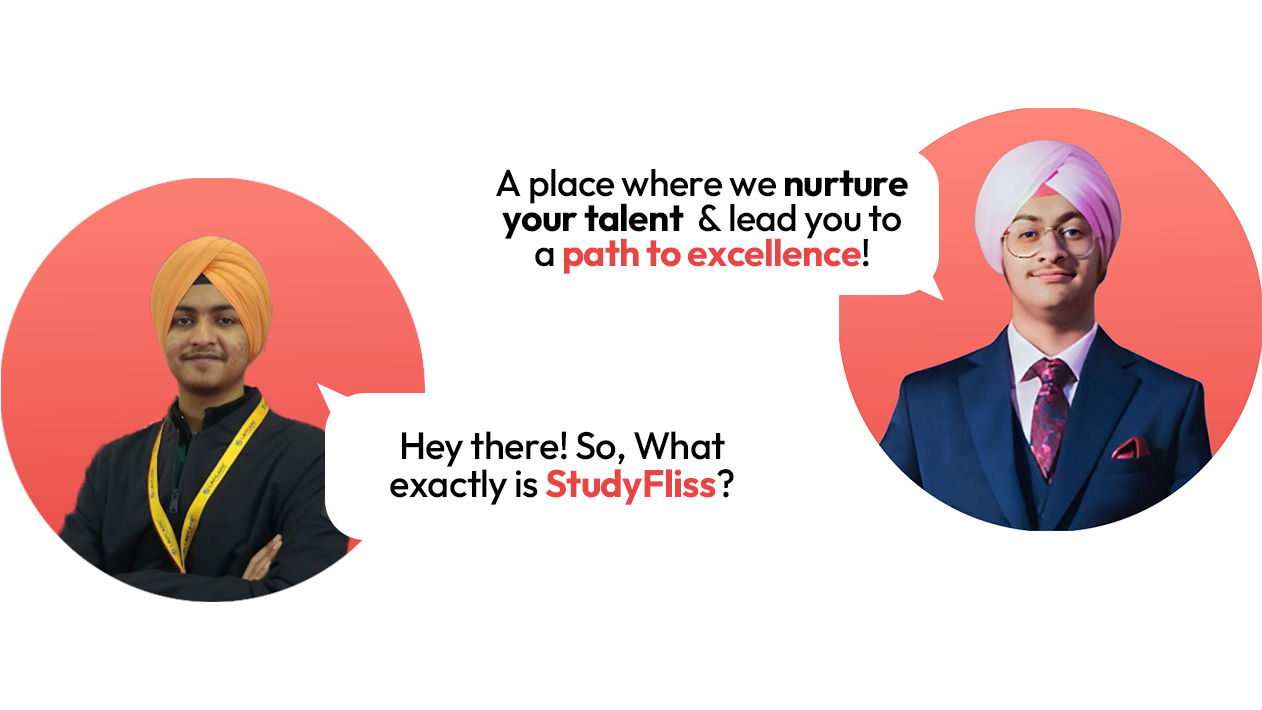
<style>
.page{position:relative;width:1262px;height:710px;background:#ffffff}
.page>*{position:absolute;margin:0}
.t1{font:37.5px/35.4px "Outfit-Bold";letter-spacing:-0.02em;color:#000000}
.t2{font:37.5px/35.4px "Outfit-Medium";letter-spacing:-0.02em;color:#000000}
.t3{font:37.5px/35.4px "Outfit-Bold";letter-spacing:-0.02em;color:#e84545}
.t4{font:38.3px/38.3px "Outfit-Medium";letter-spacing:-0.02em;color:#000000}
.t5{font:38.3px/38.3px "Outfit-Bold";letter-spacing:-0.02em;color:#e84545}
</style>
<div class="page">
<p class="t1" style="left:496px;top:169px;width:412px;height:105px;text-align:center"><span class="t2">A place where we </span>nurture<br>your talent<span class="t2">  &amp; lead you to<br>a </span><span class="t3">path to excellence</span><span class="t2">!</span></p>
<p class="t4" style="left:390px;top:431px;width:344px;height:74px;text-align:center">Hey there! So, What exactly is <span class="t5">StudyFliss</span>?</p>
</div>
